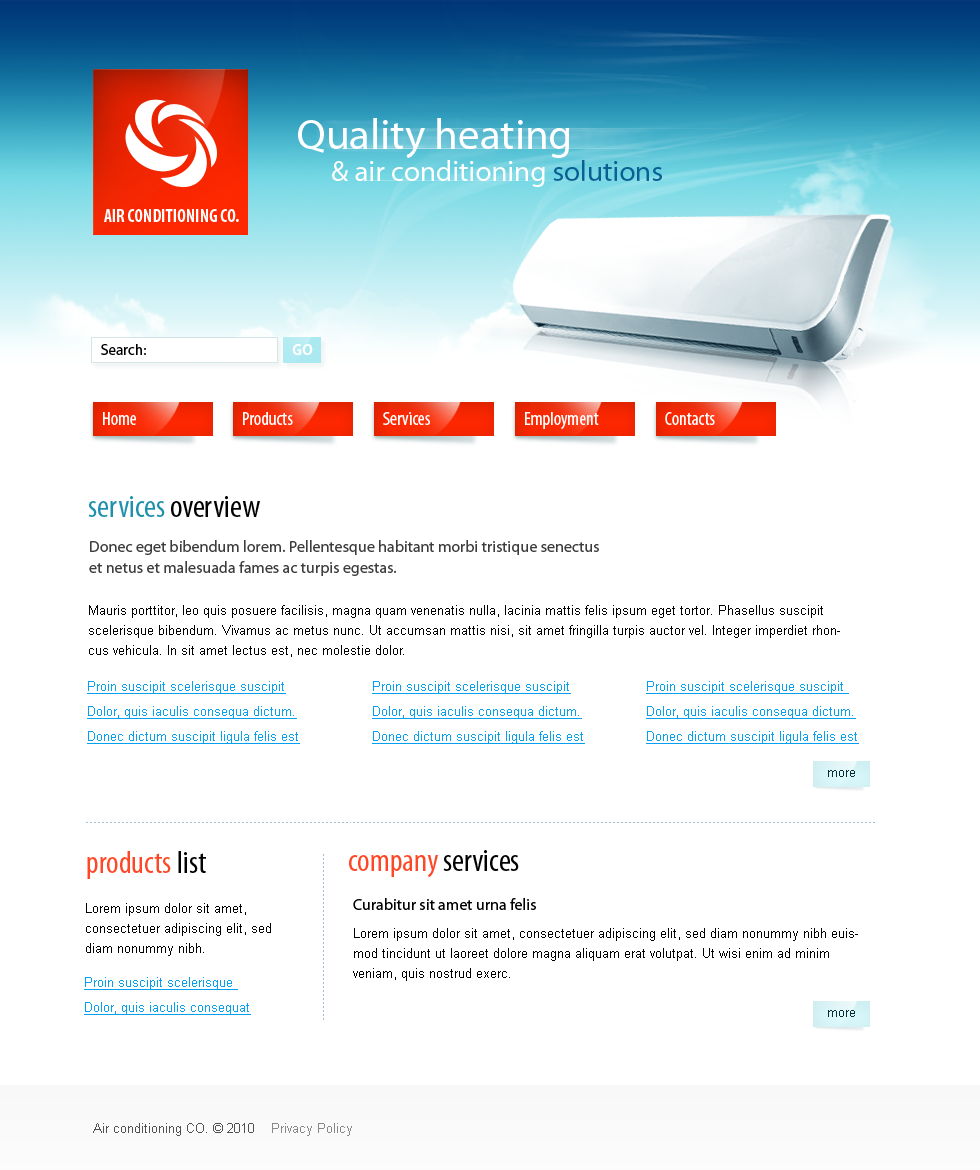
<style>
.page{position:relative;width:980px;height:1170px;background:#ffffff}
.page>*{position:absolute;margin:0}
.t1{font:43px "MyriadPro-Regular";color:#ffffff}
.t2{font:29px "MyriadPro-Regular";color:#ffffff}
.t3{font:29px "MyriadPro-Regular";color:#0a5f93}
.t4{font:18px "MyriadPro-BoldCond";color:#ffffff;text-transform:uppercase}
.t5{font:15px "MyriadPro-Regular";color:#000000}
.t6{font:15px "MyriadPro-Bold";color:#ffffff}
.t7{font:19px "MyriadPro-Cond";color:#ffffff}
.t8{font:32px "MyriadPro-Cond";color:#1e90ac}
.t9{font:32px "MyriadPro-Cond";color:#010101}
.t10{font:16px/21px "MyriadPro-Regular";color:#3d3d3d}
.t11{font:13px/20px "ArialMT";color:#000000}
.t12{font:13px/25px "ArialMT";color:#05a0ef;text-decoration:underline}
.t13{font:13px "ArialMT";color:#03303a}
.t14{font:32px "MyriadPro-Cond";color:#fe4726}
.t15{font:32px "MyriadPro-Cond";color:#000000}
.t16{font:16px "MyriadPro-Regular";color:#000000}
.t17{font:13px "ArialMT";color:#515151}
.t18{font:13px "ArialMT";color:#888888}
</style>
<div class="page">
<p class="t1" style="left:298px;top:118px;width:272px;height:41px">Quality heating</p>
<p class="t2" style="left:332px;top:160px;width:330px;height:27px">&amp; air conditioning <span class="t3">solutions</span></p>
<p class="t4" style="left:104px;top:209px;width:135px;height:13px">Air conditioning CO.</p>
<p class="t5" style="left:101px;top:344px;width:45px;height:11px">Search:</p>
<p class="t6" style="left:292px;top:344px;width:21px;height:11px">GO</p>
<p class="t7" style="left:103px;top:412px;width:33px;height:13px">Home</p>
<p class="t7" style="left:243px;top:412px;width:50px;height:13px">Products</p>
<p class="t7" style="left:383px;top:412px;width:47px;height:13px">Services</p>
<p class="t7" style="left:525px;top:412px;width:74px;height:18px">Employment</p>
<p class="t7" style="left:665px;top:412px;width:50px;height:13px">Contacts</p>
<p class="t8" style="left:88px;top:496px;width:172px;height:21px">services <span class="t9">overview</span></p>
<p class="t10" style="left:89px;top:540px;width:510px;height:36px">Donec eget bibendum lorem. Pellentesque habitant morbi tristique senectus et netus et malesuada fames ac turpis egestas.</p>
<p class="t11" style="left:89px;top:605px;width:751px;height:52px">Mauris porttitor, leo quis posuere facilisis, magna quam venenatis nulla, lacinia mattis felis ipsum eget tortor. Phasellus suscipit scelerisque bibendum. Vivamus ac metus nunc. Ut accumsan mattis nisi, sit amet fringilla turpis auctor vel. Integer imperdiet rhoncus vehicula. In sit amet lectus est, nec molestie dolor.</p>
<p class="t12" style="left:87px;top:681px;width:213px;height:63px">Proin suscipit scelerisque suscipit<br>Dolor, quis iaculis consequa dictum.<br>Donec dictum suscipit ligula felis est</p>
<p class="t12" style="left:372px;top:681px;width:213px;height:63px">Proin suscipit scelerisque suscipit<br>Dolor, quis iaculis consequa dictum.<br>Donec dictum suscipit ligula felis est</p>
<p class="t12" style="left:646px;top:681px;width:213px;height:63px">Proin suscipit scelerisque suscipit <br>Dolor, quis iaculis consequa dictum.<br>Donec dictum suscipit ligula felis est</p>
<p class="t13" style="left:828px;top:770px;width:27px;height:7px">more</p>
<p class="t14" style="left:87px;top:851px;width:119px;height:28px">products<span class="t15"> list</span></p>
<p class="t9" style="left:349px;top:850px;width:170px;height:28px"><span class="t14">company </span>services</p>
<p class="t11" style="left:86px;top:903px;width:185px;height:53px">Lorem ipsum dolor sit amet, consectetuer adipiscing elit, sed diam nonummy nibh.</p>
<p class="t16" style="left:353px;top:898px;width:183px;height:12px">Curabitur sit amet urna felis</p>
<p class="t11" style="left:353px;top:928px;width:505px;height:53px">Lorem ipsum dolor sit amet, consectetuer adipiscing elit, sed diam nonummy nibh euismod tincidunt ut laoreet dolore magna aliquam erat volutpat. Ut wisi enim ad minim veniam, quis nostrud exerc.</p>
<p class="t12" style="left:84px;top:977px;width:167px;height:38px">Proin suscipit scelerisque <br>Dolor, quis iaculis consequat</p>
<p class="t13" style="left:828px;top:1010px;width:27px;height:7px">more</p>
<p class="t17" style="left:93px;top:1123px;width:259px;height:13px">Air conditioning CO. © 2010<span class="t18">    Privacy Policy</span></p>
</div>
